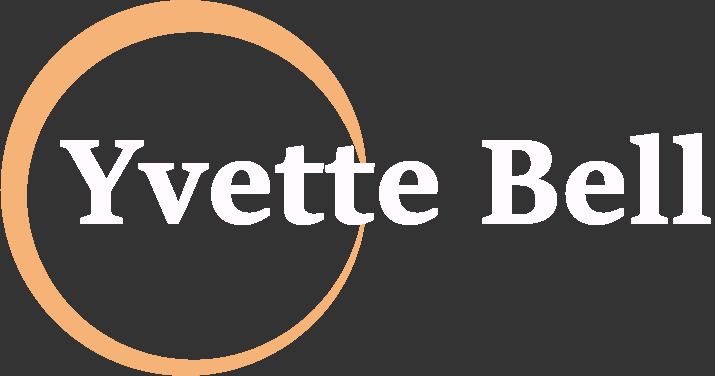
<style>
.page{position:relative;width:715px;height:376px;background:#333333}
.page>*{position:absolute;margin:0}
.t1{font:130.8px "SitkaHeading-Bold";color:#fffbfe;font-weight:bold}
</style>
<div class="page">
<p class="t1" style="left:60px;top:133px;width:651px;height:92px">Yvette Bell</p>
</div>
